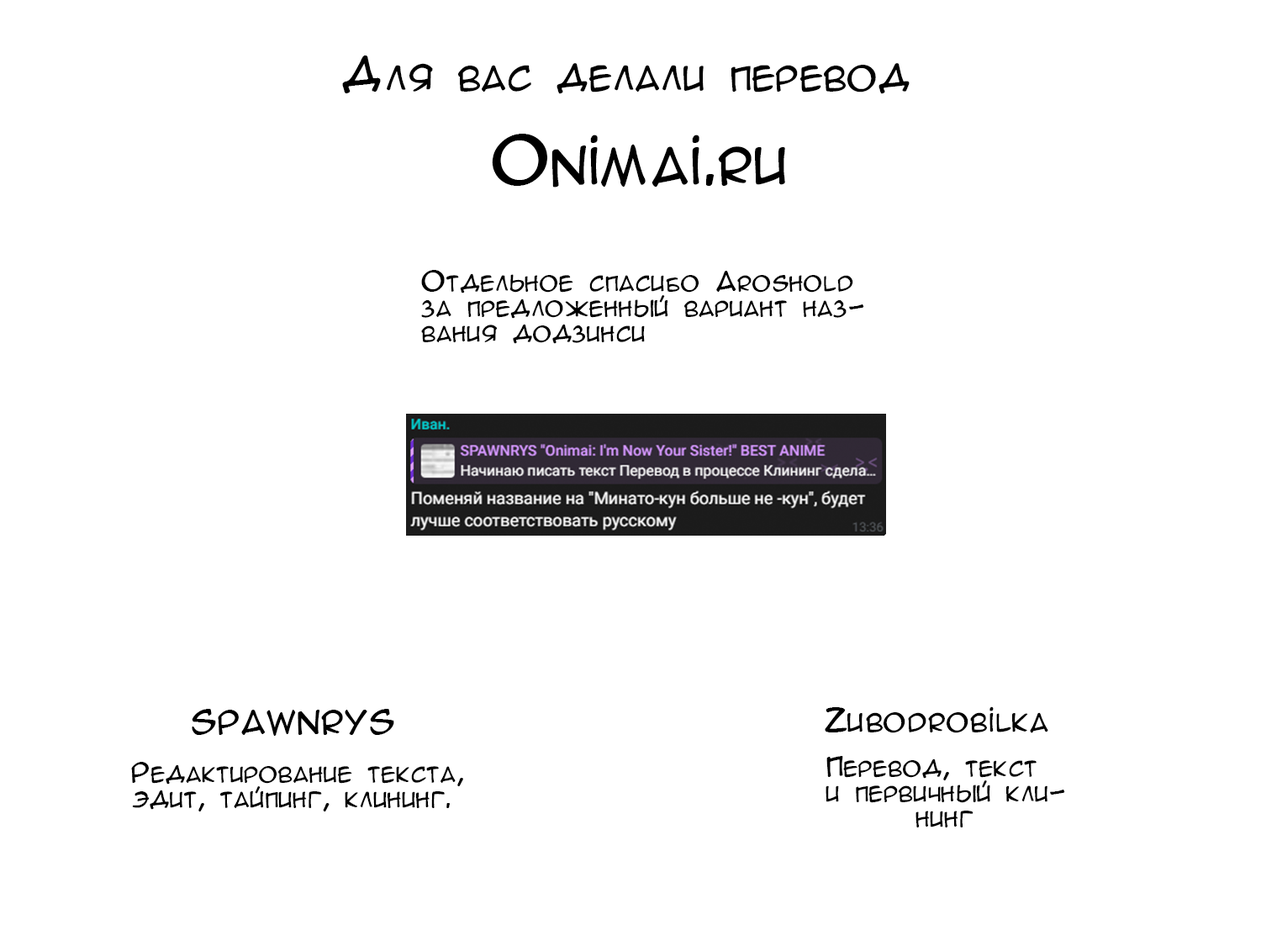
<style>
.page{position:relative;width:1261px;height:946px;background:#ffffff}
.page>*{position:absolute;margin:0}
.t1{font:40.3px "AnimeAcev3";color:#000000}
.t2{font:60.5px "AnimeAcev3";color:#000000}
.t3{font:25.2px/25.2px "AnimeAcev3";color:#000000}
.t4{font:30.3px "AnimeAcev3";color:#000000}
</style>
<div class="page">
<p class="t1" style="left:342px;top:55px;width:568px;height:39px">Для вас делали перевод</p>
<p class="t2" style="left:492px;top:134px;width:293px;height:53px">Onimai.ru</p>
<p class="t3" style="left:421px;top:270px;width:443px;height:74px">Отдельное спасибо Aroshold<br>за предложенный вариант наз-<br>вания додзинси</p>
<p class="t4" style="left:192px;top:709px;width:202px;height:27px">SPAWNRYS</p>
<p class="t4" style="left:825px;top:706px;width:223px;height:27px">Zubodrobilka</p>
<p class="t3" style="left:131px;top:762px;width:332px;height:49px">Редактирование текста,<br>эдит, тайпинг, клининг.</p>
<p class="t3" style="left:825px;top:756px;width:240px;height:71px">Перевод, текст<br>и первичный кли-<br>      нинг</p>
</div>
